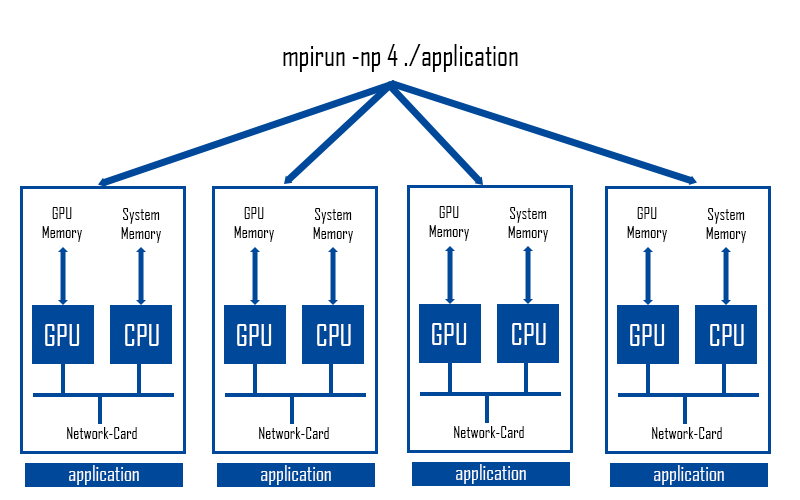
<style>
.page{position:relative;width:800px;height:500px;background:#ffffff}
.page>*{position:absolute;margin:0}
.t1{font:28.7px "AgencyFB-Reg";color:#000000}
.t2{font:16.2px "AgencyFB-Reg";color:#000000}
.t3{font:28.7px "AgencyFB-Reg";color:#ffffff}
.t4{font:20.9px "AgencyFB-Reg";color:#ffffff}
</style>
<div class="page">
<p class="t1" style="left:283px;top:44px;width:235px;height:28px">mpirun -np 4 ./application</p>
<p class="t2" style="left:42px;top:207px;width:40px;height:35px;text-align:center">GPU<br>Memory</p>
<p class="t2" style="left:121px;top:208px;width:40px;height:35px;text-align:center">System<br>Memory</p>
<p class="t2" style="left:234px;top:207px;width:40px;height:35px;text-align:center">GPU<br>Memory</p>
<p class="t2" style="left:313px;top:208px;width:40px;height:35px;text-align:center">System<br>Memory</p>
<p class="t2" style="left:429px;top:206px;width:40px;height:35px;text-align:center">GPU<br>Memory</p>
<p class="t2" style="left:508px;top:207px;width:40px;height:35px;text-align:center">System<br>Memory</p>
<p class="t2" style="left:627px;top:207px;width:40px;height:35px;text-align:center">GPU<br>Memory</p>
<p class="t2" style="left:706px;top:208px;width:40px;height:35px;text-align:center">System<br>Memory</p>
<p class="t3" style="left:45px;top:324px;width:35px;height:22px">GPU</p>
<p class="t3" style="left:125px;top:324px;width:34px;height:22px">CPU</p>
<p class="t3" style="left:237px;top:324px;width:35px;height:22px">GPU</p>
<p class="t3" style="left:317px;top:324px;width:34px;height:22px">CPU</p>
<p class="t3" style="left:432px;top:323px;width:35px;height:22px">GPU</p>
<p class="t3" style="left:512px;top:323px;width:34px;height:22px">CPU</p>
<p class="t3" style="left:630px;top:324px;width:35px;height:22px">GPU</p>
<p class="t3" style="left:710px;top:324px;width:34px;height:22px">CPU</p>
<p class="t2" style="left:67px;top:427px;width:70px;height:12px">Network-Card</p>
<p class="t2" style="left:259px;top:427px;width:70px;height:12px">Network-Card</p>
<p class="t2" style="left:454px;top:426px;width:70px;height:12px">Network-Card</p>
<p class="t2" style="left:652px;top:427px;width:70px;height:12px">Network-Card</p>
<p class="t4" style="left:69px;top:465px;width:70px;height:20px">application</p>
<p class="t4" style="left:261px;top:465px;width:70px;height:20px">application</p>
<p class="t4" style="left:456px;top:464px;width:70px;height:20px">application</p>
<p class="t4" style="left:654px;top:465px;width:70px;height:20px">application</p>
</div>
